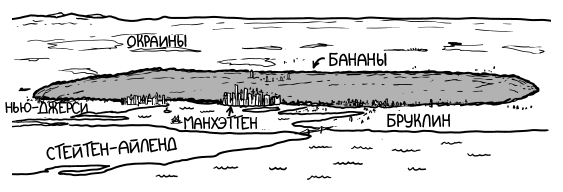
<style>
.page{position:relative;width:563px;height:192px;background:#ffffff}
.page>*{position:absolute;margin:0}
.t1{font:16.7px "SarcasmInk";color:#000000}
.t2{font:18.1px "SarcasmInk";color:#000000}
.t3{font:15.3px "SarcasmInk";color:#000000}
</style>
<div class="page">
<p class="t1" style="left:127px;top:34px;width:60px;height:14px">Окраины</p>
<p class="t2" style="left:329px;top:52px;width:58px;height:15px">Бананы</p>
<p class="t3" style="left:5px;top:101px;width:83px;height:13px">Нью-Джерси</p>
<p class="t2" style="left:387px;top:113px;width:63px;height:15px">Бруклин</p>
<p class="t1" style="left:184px;top:115px;width:73px;height:15px">Манхэттен</p>
<p class="t2" style="left:46px;top:137px;width:132px;height:24px;rotate:-5deg">Стейтен-Айленд</p>
</div>
